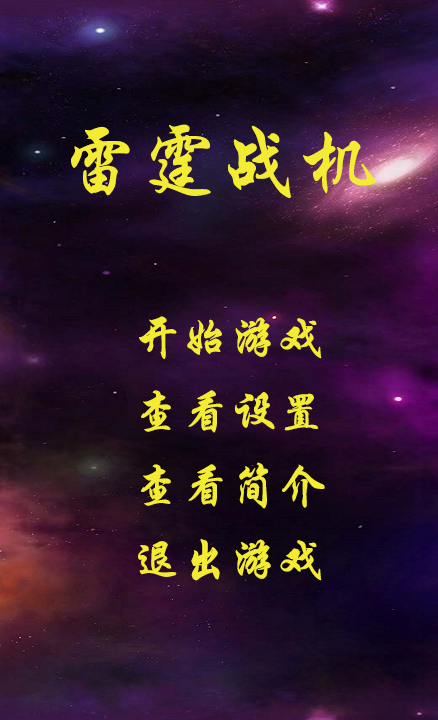
<style>
.page{position:relative;width:438px;height:720px}
.page>*{position:absolute;margin:0}
.t1{font:80px "STXingkai";color:#f3ec32}
.t2{font:48px "STXingkai";color:#f3ec32}
</style>
<div class="page">
<p class="t1" style="left:71px;top:124px;width:305px;height:74px">雷霆战机</p>
<p class="t2" style="left:139px;top:316px;width:183px;height:43px">开始游戏</p>
<p class="t2" style="left:141px;top:390px;width:178px;height:43px">查看设置</p>
<p class="t2" style="left:141px;top:462px;width:184px;height:47px">查看简介</p>
<p class="t2" style="left:138px;top:538px;width:184px;height:43px">退出游戏</p>
</div>
